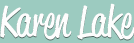
<style>
.page{position:relative;width:134px;height:43px;background:#9ccbc0}
.page>*{position:absolute;margin:0}
.t1{font:42.8px "ReklameScript-Regular";color:#fdfdfd}
</style>
<div class="page">
<p class="t1" style="left:0px;top:3px;width:135px;height:37px">Karen Lake</p>
</div>
